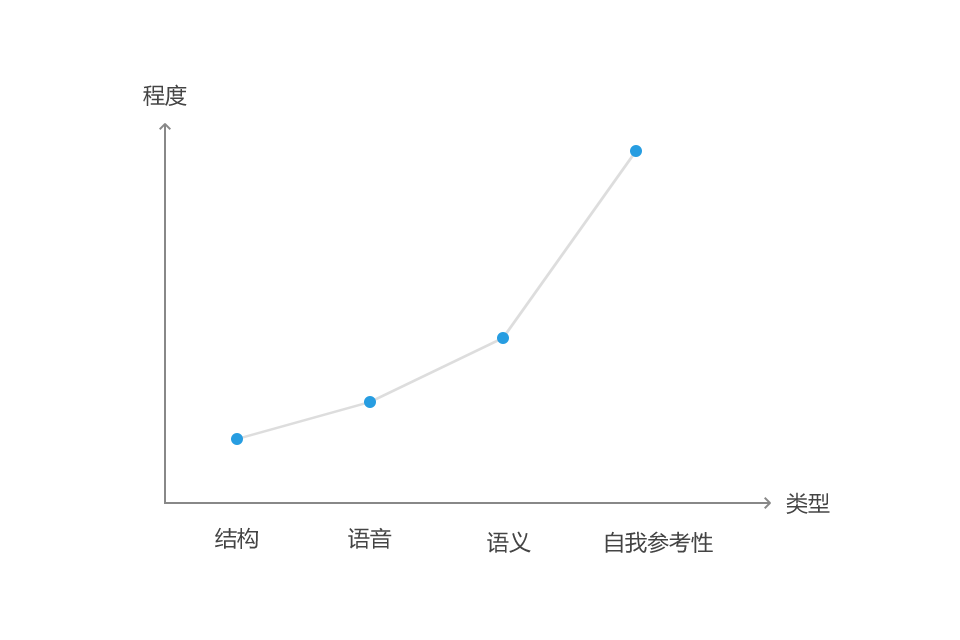
<style>
.page{position:relative;width:960px;height:640px;background:#ffffff}
.page>*{position:absolute;margin:0}
.t1{font:22px "MicrosoftYaHei";color:#444444}
</style>
<div class="page">
<p class="t1" style="left:143px;top:84px;width:44px;height:22px">程度</p>
<p class="t1" style="left:786px;top:492px;width:44px;height:22px">类型</p>
<p class="t1" style="left:215px;top:527px;width:43px;height:22px">结构</p>
<p class="t1" style="left:348px;top:527px;width:44px;height:22px">语音</p>
<p class="t1" style="left:487px;top:531px;width:44px;height:22px">语义</p>
<p class="t1" style="left:605px;top:531px;width:108px;height:22px">自我参考性</p>
</div>
